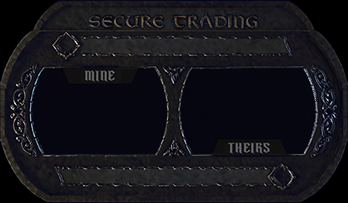
<style>
.page{position:relative;width:348px;height:203px}
.page>*{position:absolute;margin:0}
.t1{font:12px "MedievalTimes";color:#656565;scale:1.25 1}
.t2{font:12px "MedievalTimes";color:#666666;scale:1.25 1}
</style>
<div class="page">
<p class="t1" style="left:84px;top:70px;width:31px;height:12px">MINE</p>
<p class="t2" style="left:227px;top:142px;width:43px;height:12px">THEIRS</p>
</div>
